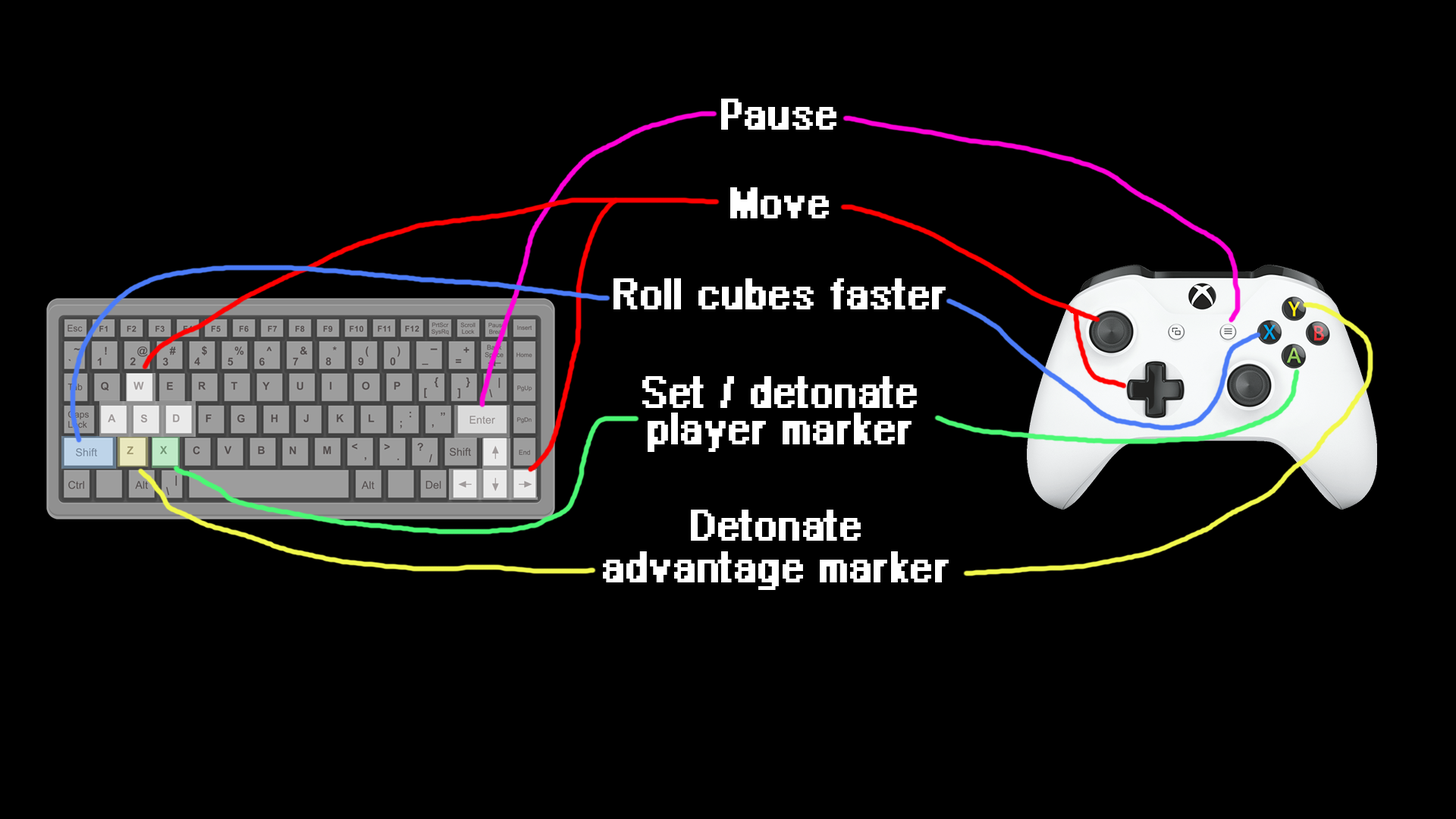
<style>
.page{position:relative;width:1456px;height:819px;background:#000000}
.page>*{position:absolute;margin:0}
.t1{font:30.6px "PixelArial11Bold";color:#ffffff;scale:0.88 1}
.t2{font:31.6px/36.3px "PixelArial11Bold";color:#ffffff;scale:0.86 1}
.t3{font:30.6px/41.7px "PixelArial11Bold";color:#ffffff;scale:0.88 1}
</style>
<div class="page">
<p class="t1" style="left:721px;top:99px;width:115px;height:31px">Pause</p>
<p class="t1" style="left:730px;top:187px;width:99px;height:31px">Move</p>
<p class="t1" style="left:613px;top:278px;width:333px;height:31px">Roll cubes faster</p>
<p class="t2" style="left:642px;top:376px;width:275px;height:76px;text-align:center">Set / detonate<br>player marker</p>
<p class="t3" style="left:603px;top:510px;width:346px;height:80px;text-align:center">Detonate<br>advantage marker</p>
</div>
